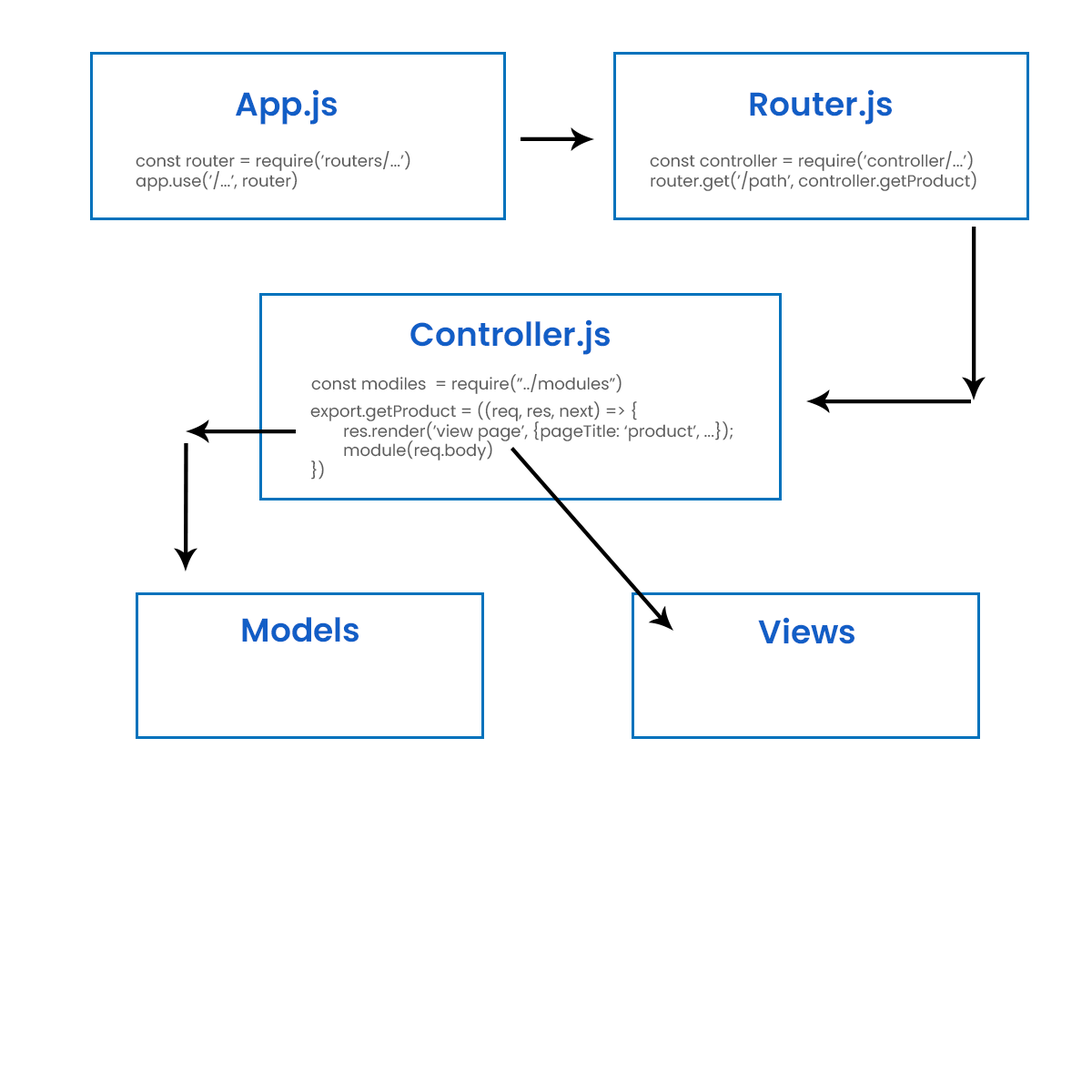
<style>
.page{position:relative;width:1092px;height:1092px;background:#ffffff}
.page>*{position:absolute;margin:0}
.t1{font:32.8px "Poppins-SemiBold";color:#125ec6}
.t2{font:16.4px "Poppins-Regular";color:#5b5b5b}
</style>
<div class="page">
<p class="t1" style="left:236px;top:89px;width:101px;height:36px">App.js</p>
<p class="t1" style="left:750px;top:89px;width:142px;height:36px">Router.js</p>
<p class="t2" style="left:136px;top:150px;width:274px;height:41px">const router = require(’routers/...’)<br>app.use(’/...’, router)</p>
<p class="t2" style="left:650px;top:150px;width:326px;height:41px">const controller = require(’controller/...’)<br>router.get(’/path’, controller.getProduct)</p>
<p class="t1" style="left:410px;top:319px;width:200px;height:36px">Controller.js</p>
<p class="t2" style="left:311px;top:373px;width:311px;height:21px">const modiles  = require(”../modules”)</p>
<p class="t2" style="left:310px;top:401px;width:423px;height:79px">export.getProduct = ((req, res, next) =&gt; {<br> res.render(’view page’, {pageTitle: ‘product’, ...});<br> module(req.body)<br>})</p>
<p class="t1" style="left:242px;top:617px;width:117px;height:25px">Models</p>
<p class="t1" style="left:758px;top:617px;width:96px;height:27px">Views</p>
</div>
